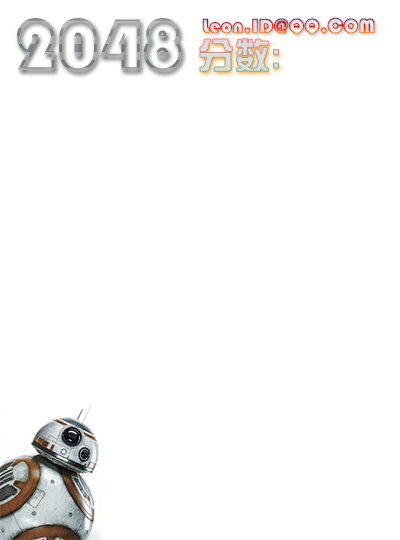
<style>
.page{position:relative;width:400px;height:540px;background:#fffffd}
.page>*{position:absolute;margin:0}
.t1{font:20px "STCaiyun";letter-spacing:0.02em}
.t2{font:72px "STCaiyun";letter-spacing:0.02em}
.t3{font:36px "FZZYJW--GB1-0";letter-spacing:0.02em;color:#dcdcdc}
</style>
<div class="page">
<p class="t1" style="left:202px;top:17px;width:173px;height:18px">Leon.ID@QQ.COM</p>
<p class="t2" style="left:17px;top:18px;width:165px;height:54px">2048</p>
<p class="t3" style="left:200px;top:38px;width:79px;height:34px">分数:</p>
</div>
